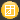
<style>
.page{position:relative;width:20px;height:20px}
.page>*{position:absolute;margin:0}
.t1{font:12px "SimSun";color:#ffffff}
</style>
<div class="page">
<p class="t1" style="left:5px;top:5px;width:10px;height:11px">团</p>
</div>
